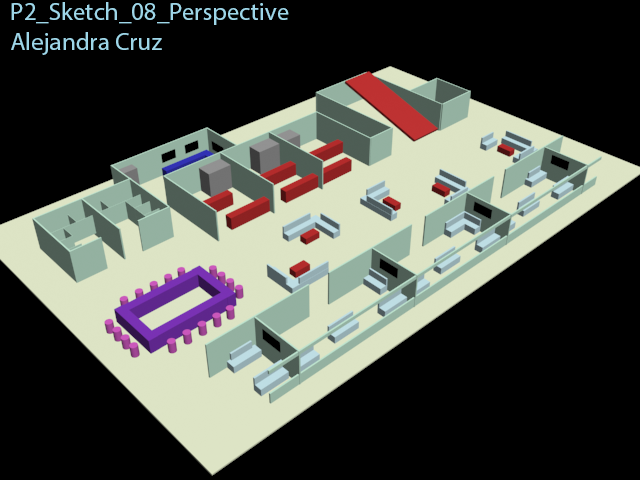
<style>
.page{position:relative;width:640px;height:480px;background:#000000}
.page>*{position:absolute;margin:0}
.t1{font:25px "MyriadPro-Regular";color:#9ed6e8}
</style>
<div class="page">
<p class="t1" style="left:11px;top:2px;width:278px;height:53px">P2_Sketch_08_Perspective<br>Alejandra Cruz</p>
</div>
